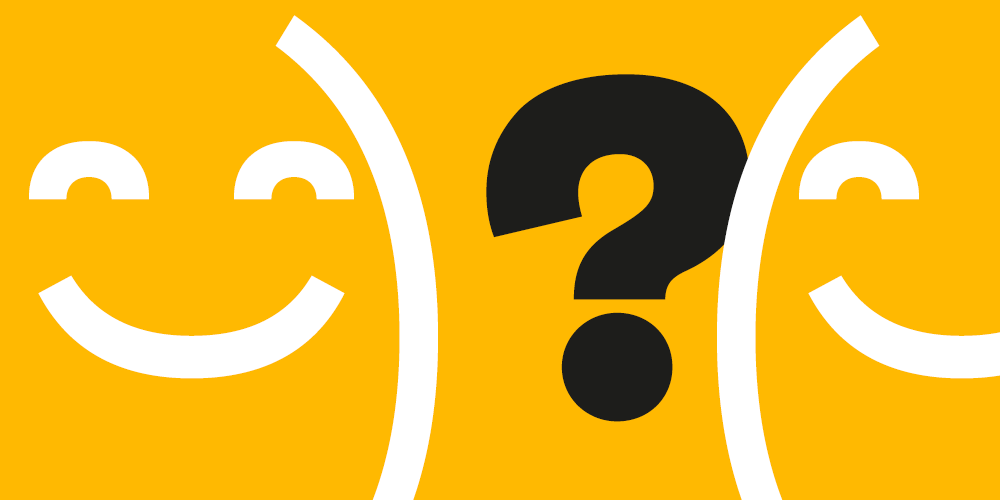
<style>
.page{position:relative;width:1000px;height:500px;background:#ffb901}
.page>*{position:absolute;margin:0}
.t1{font:480px "Ambit-Black";letter-spacing:0.01em;color:#1d1d1b;font-variant:small-caps}
.t2{font:550px "ArialMT";letter-spacing:0.01em;color:#1d1d1b;font-variant:small-caps}
.t3{font:400px "Ambit-Bold";letter-spacing:0.01em;color:#ffffff;font-variant:small-caps}
.t4{font:349.8px "Ambit-Bold";letter-spacing:0.01em;color:#ffffff;font-variant:small-caps}
</style>
<div class="page">
<p class="t1" style="left:486px;top:74px;width:264px;height:348px">?</p>
<p class="t2" style="left:471px;top:79px;width:294px;height:338px">♥</p>
<p class="t2" style="left:471px;top:79px;width:294px;height:338px">♥</p>
<p class="t3" style="left:29px;top:141px;width:120px;height:59px">˘</p>
<p class="t3" style="left:234px;top:141px;width:120px;height:59px">˘</p>
<p class="t3" style="left:799px;top:141px;width:120px;height:59px">˘</p>
<p class="t4" style="left:38px;top:275px;width:307px;height:104px;rotate:90deg">)</p>
</div>
